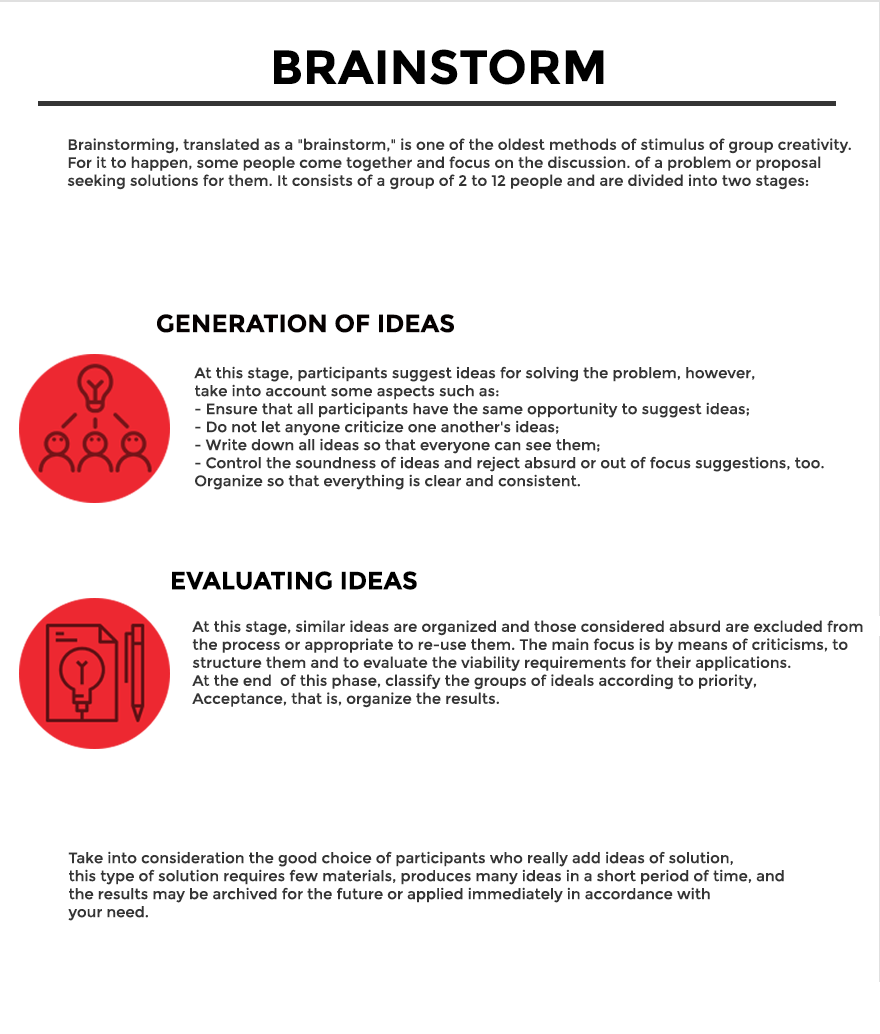
<style>
.page{position:relative;width:880px;height:1034px;background:#ffffff}
.page>*{position:absolute;margin:0}
.t1{font:48px "Montserrat-Bold";color:#000000}
.t2{font:15px "Montserrat-Regular";color:#353535}
.t3{font:25px "Montserrat-Bold";color:#060101}
.t4{font:25px "Montserrat-Bold";color:#000000}
</style>
<div class="page">
<p class="t1" style="left:274px;top:49px;width:330px;height:36px">BRAINSTORM</p>
<p class="t2" style="left:67px;top:138px;width:784px;height:52px">Brainstorming, translated as a "brainstorm," is one of the oldest methods of stimulus of group creativity. <br>For it to happen, some people come together and focus on the discussion. of a problem or proposal <br>seeking solutions for them. It consists of a group of 2 to 12 people and are divided into two stages:</p>
<p class="t3" style="left:157px;top:314px;width:297px;height:19px">GENERATION OF IDEAS</p>
<p class="t2" style="left:194px;top:366px;width:630px;height:124px">At this stage, participants suggest ideas for solving the problem, however,<br>take into account some aspects such as:<br>- Ensure that all participants have the same opportunity to suggest ideas;<br>- Do not let anyone criticize one another's ideas;<br>- Write down all ideas so that everyone can see them;<br>- Control the soundness of ideas and reject absurd or out of focus suggestions, too.<br>Organize so that everything is clear and consistent.</p>
<p class="t4" style="left:172px;top:571px;width:245px;height:19px">EVALUATING IDEAS</p>
<p class="t2" style="left:192px;top:620px;width:671px;height:88px">At this stage, similar ideas are organized and those considered absurd are excluded from <br>the process or appropriate to re-use them. The main focus is by means of criticisms, to <br>structure them and to evaluate the viability requirements for their applications. <br>At the end  of this phase, classify the groups of ideals according to priority,<br>Acceptance, that is, organize the results.</p>
<p class="t2" style="left:68px;top:851px;width:716px;height:70px">Take into consideration the good choice of participants who really add ideas of solution,<br>this type of solution requires few materials, produces many ideas in a short period of time, and<br>the results may be archived for the future or applied immediately in accordance with<br>your need.</p>
</div>
